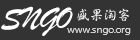
<style>
.page{position:relative;width:140px;height:40px;background:#333333}
.page>*{position:absolute;margin:0}
.t1{font:32px "STXingkai";letter-spacing:-0.03em;color:#ffffff}
.t2{font:14px "GBHerSin-Medium";letter-spacing:-0.03em}
.t3{font:10px "MicrosoftYaHeiUI";letter-spacing:-0.03em;color:#d7d7d7}
</style>
<div class="page">
<p class="t1" style="left:1px;top:6px;width:72px;height:30px">SNGO</p>
<p class="t2" style="left:77px;top:8px;width:52px;height:13px">盛果淘客</p>
<p class="t3" style="left:67px;top:28px;width:64px;height:7px">www.sngo.org</p>
</div>
